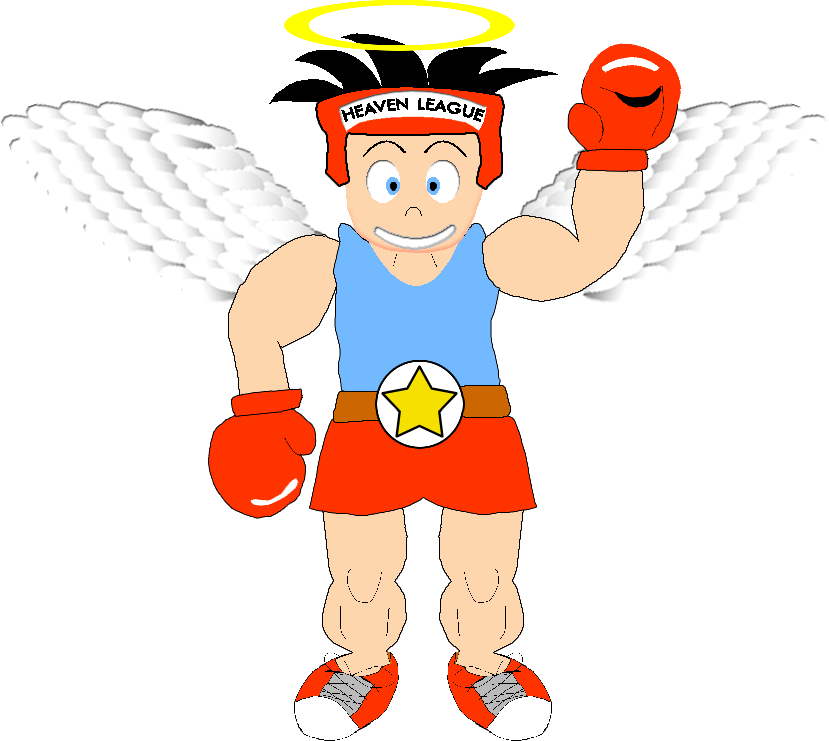
<style>
.page{position:relative;width:829px;height:741px;background:#ffffff}
.page>*{position:absolute;margin:0}
.t1{font:26px "TwCenMT-Regular";color:#000000;font-variant:small-caps}
</style>
<div class="page">
<p class="t1" style="left:341px;top:98px;width:144px;height:24px">heaven league</p>
</div>
